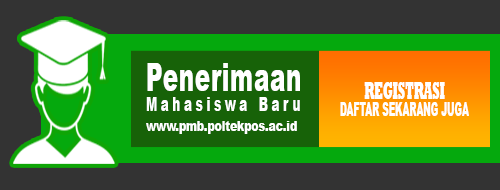
<style>
.page{position:relative;width:500px;height:190px;background:#333333}
.page>*{position:absolute;margin:0}
.t1{font:19.3px/19.3px "Arial-Black";letter-spacing:0.33em;color:#ffffff;scale:0.6 1}
.t2{font:38.6px/45px "Arial-Black";letter-spacing:0.025em;color:#ffffff;scale:0.6 1}
.t3{font:19.4px/16.7px "Arial-Black";color:#ffffff;scale:0.46 1}
.t4{font:25.2px/16.7px "Rockwell-ExtraBold";color:#ffffff;scale:0.46 1}
.t5{font:14.1px "Arial-Black";color:#ffffff;scale:0.76 1}
</style>
<div class="page">
<p class="t1" style="left:146px;top:63px;width:154px;height:48px"><span class="t2">Penerimaan<br></span>Mahasiswa Baru</p>
<p class="t3" style="left:340px;top:82px;width:129px;height:34px;text-align:center"><span class="t4">REGISTRASI<br></span>DAFTAR SEKARANG JUGA</p>
<p class="t5" style="left:146px;top:121px;width:151px;height:13px">www.pmb.poltekpos.ac.id</p>
</div>
